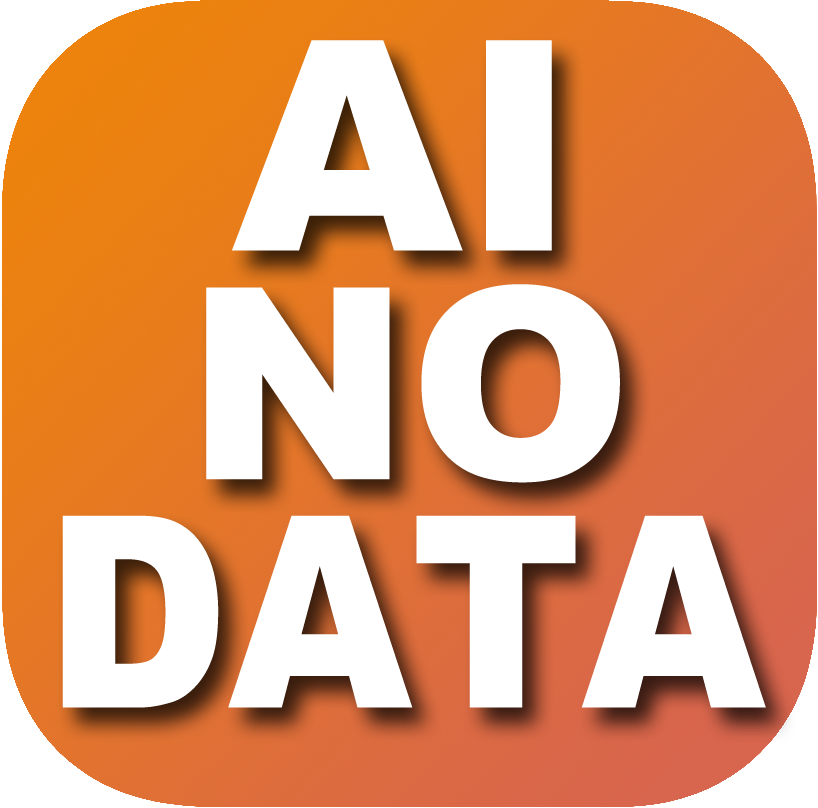
<style>
.page{position:relative;width:818px;height:808px;background:#ffffff}
.page>*{position:absolute;margin:0}
.t1{font:293.4px "Arial-Black";color:#ffffff}
.t2{font:267.6px "Arial-Black";color:#ffffff}
.t3{font:267.6px "Arial-Black";color:#ffffff;scale:0.88 1}
</style>
<div class="page">
<p class="t1" style="left:232px;top:40px;width:320px;height:211px">AI</p>
<p class="t2" style="left:206px;top:284px;width:414px;height:199px">NO</p>
<p class="t3" style="left:62px;top:515px;width:704px;height:193px">DATA</p>
</div>
